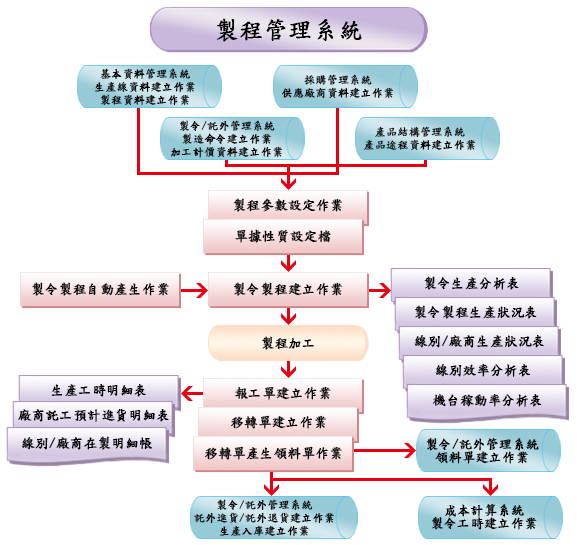
<style>
.page{position:relative;width:577px;height:545px;background:#ffffff}
.page>*{position:absolute;margin:0}
.t1{font:24px "DFKaiShu-SB-Estd-BF";color:#000000;font-weight:bold}
.t2{font:11px/13px "DFKaiShu-SB-Estd-BF";color:#000000;font-weight:bold}
.t3{font:13.5px "DFKaiShu-SB-Estd-BF";color:#000000;font-weight:bold}
.t4{font:13px/13px "DFKaiShu-SB-Estd-BF";color:#000000;font-weight:bold}
</style>
<div class="page">
<p class="t1" style="left:217px;top:18px;width:145px;height:24px">製程管理系統</p>
<p class="t2" style="left:95px;top:68px;width:100px;height:38px;text-align:center">基本資料管理系統<br>生產線資料建立作業<br>製程資料建立作業</p>
<p class="t2" style="left:282px;top:74px;width:112px;height:25px;text-align:center">採購管理系統<br>供應廠商資料建立作業</p>
<p class="t2" style="left:170px;top:120px;width:113px;height:38px;text-align:center">製令/託外管理系統<br>製造命令建立作業<br>加工計價資料建立作業</p>
<p class="t2" style="left:363px;top:126px;width:113px;height:25px;text-align:center">產品結構管理系統<br>產品途程資料建立作業</p>
<p class="t3" style="left:233px;top:198px;width:110px;height:14px">製程參數設定作業</p>
<p class="t3" style="left:235px;top:229px;width:96px;height:14px">單據性質設定檔</p>
<p class="t3" style="left:424px;top:276px;width:95px;height:14px">製令生產分析表</p>
<p class="t3" style="left:32px;top:282px;width:137px;height:14px">製令製程自動產生作業</p>
<p class="t3" style="left:233px;top:282px;width:110px;height:14px">製令製程建立作業</p>
<p class="t3" style="left:414px;top:305px;width:123px;height:14px">製令製程生產狀況表</p>
<p class="t3" style="left:262px;top:336px;width:52px;height:14px">製程加工</p>
<p class="t3" style="left:414px;top:335px;width:130px;height:13px">線別/廠商生產狀況表</p>
<p class="t3" style="left:435px;top:363px;width:95px;height:14px">線別效率分析表</p>
<p class="t3" style="left:51px;top:384px;width:95px;height:13px">生產工時明細表</p>
<p class="t3" style="left:235px;top:386px;width:96px;height:14px">報工單建立作業</p>
<p class="t3" style="left:432px;top:393px;width:110px;height:14px">機台稼動率分析表</p>
<p class="t3" style="left:18px;top:409px;width:151px;height:13px">廠商託工預計進貨明細表</p>
<p class="t3" style="left:230px;top:415px;width:97px;height:14px">移轉單建立作業</p>
<p class="t3" style="left:21px;top:436px;width:131px;height:14px">線別/廠商在製明細帳</p>
<p class="t4" style="left:426px;top:437px;width:113px;height:27px;text-align:center">製令/託外管理系統<br>領料單建立作業</p>
<p class="t3" style="left:204px;top:446px;width:138px;height:14px">移轉單產生領料單作業</p>
<p class="t2" style="left:194px;top:499px;width:140px;height:37px;text-align:center">製令/託外管理系統<br>託外進貨/託外退貨建立作業<br>生產入庫建立作業</p>
<p class="t4" style="left:431px;top:503px;width:106px;height:27px;text-align:center">成本計算系統<br>製令工時建立作業</p>
</div>
